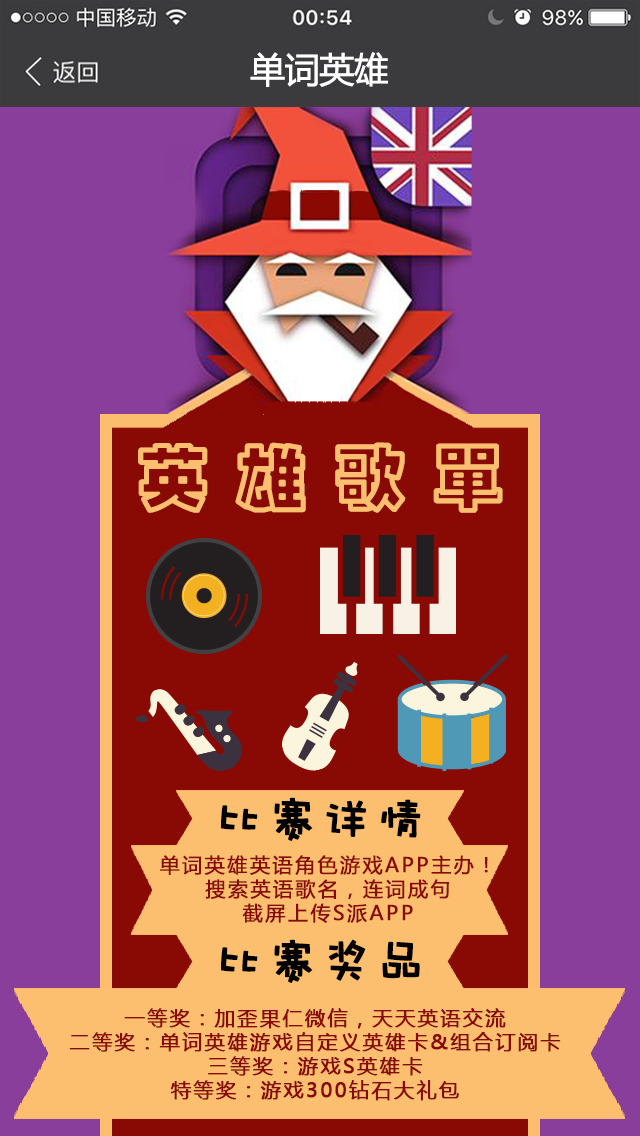
<style>
.page{position:relative;width:640px;height:1136px;background:#893e9b}
.page>*{position:absolute;margin:0}
.t1{font:35px "MicrosoftYaHei";letter-spacing:-0.04em;color:#ffffff;font-weight:bold}
.t2{font:72px "¾­µä¿ÕµþºÚ Regular";letter-spacing:0.34em;color:#fcbe6f;font-weight:bold}
.t3{font:48px "DFWaWaW5";letter-spacing:0.1em;color:#000000;font-weight:bold}
.t4{font:19.9px/23.9px "MicrosoftYaHei";letter-spacing:0.1em;color:#890904;font-weight:bold}
.t5{font:20px/24px "MicrosoftYaHei";letter-spacing:0.1em;color:#890904;font-weight:bold}
</style>
<div class="page">
<p class="t1" style="left:250px;top:52px;width:138px;height:35px">单词英雄</p>
<p class="t2" style="left:138px;top:442px;width:365px;height:71px">英雄歌单</p>
<p class="t3" style="left:221px;top:797px;width:200px;height:44px">比赛详情</p>
<p class="t4" style="left:160px;top:855px;width:328px;height:68px;text-align:center">单词英雄英语角色游戏APP主办！<br>搜索英语歌名，连词成句<br>截屏上传S派APP</p>
<p class="t3" style="left:221px;top:939px;width:199px;height:44px">比赛奖品</p>
<p class="t5" style="left:69px;top:1008px;width:492px;height:93px;text-align:center">一等奖：加歪果仁微信，天天英语交流<br>二等奖：单词英雄游戏自定义英雄卡&amp;组合订阅卡<br>三等奖：游戏S英雄卡<br>特等奖：游戏300钻石大礼包</p>
</div>
